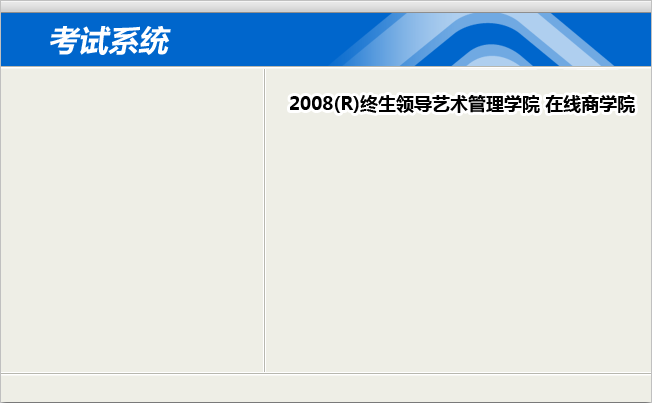
<style>
.page{position:relative;width:652px;height:403px;background:#eeeee6}
.page>*{position:absolute;margin:0}
.t1{font:30px "MicrosoftYaHei";color:#ffffff;font-style:italic}
.t2{font:18px "MicrosoftYaHei";color:#000000}
</style>
<div class="page">
<p class="t1" style="left:50px;top:26px;width:121px;height:29px">考试系统</p>
<p class="t2" style="left:290px;top:95px;width:345px;height:18px">2008(R)终生领导艺术管理学院 在线商学院</p>
</div>
